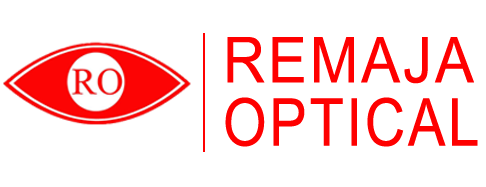
<style>
.page{position:relative;width:486px;height:187px;background:#ffffff}
.page>*{position:absolute;margin:0}
.t1{font:63.4px "ArialMT";letter-spacing:0.05em;color:#ff0000;scale:0.92 1}
.t2{font:65.9px "ArialMT";letter-spacing:0.05em;color:#fe0000;scale:0.85 1}
</style>
<div class="page">
<p class="t1" style="left:227px;top:37px;width:247px;height:47px">REMAJA</p>
<p class="t2" style="left:225px;top:97px;width:253px;height:50px">OPTICAL</p>
</div>
